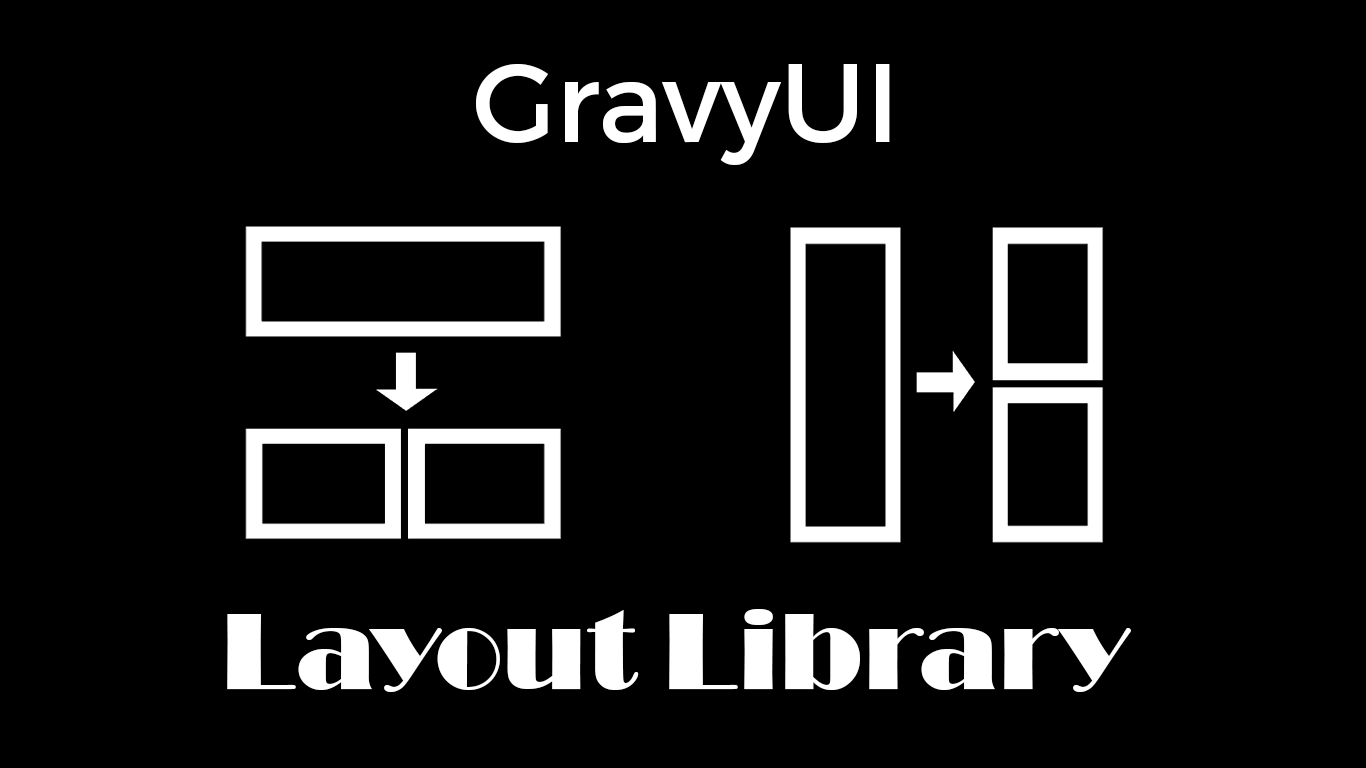
<style>
.page{position:relative;width:1366px;height:768px;background:#000000}
.page>*{position:absolute;margin:0}
.t1{font:112px "Montserrat-Regular";color:#ffffff}
.t2{font:112px "Broadway";color:#ffffff}
</style>
<div class="page">
<p class="t1" style="left:476px;top:64px;width:414px;height:101px">GravyUI</p>
<p class="t2" style="left:227px;top:609px;width:904px;height:83px">Layout Library</p>
</div>
